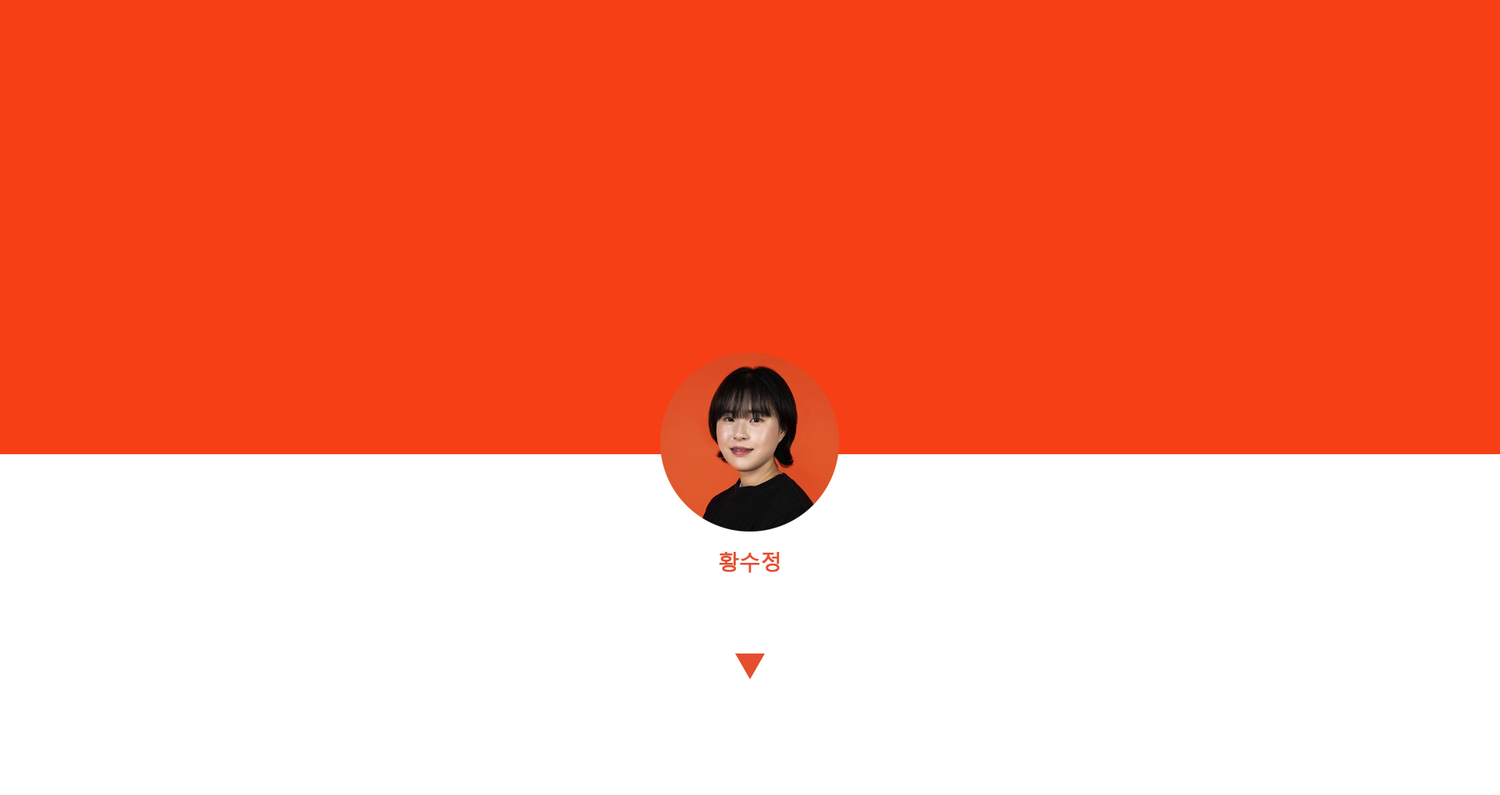
<style>
.page{position:relative;width:1500px;height:795px;background:#f63f14}
.page>*{position:absolute;margin:0}
.t1{font:20.8px "MalgunGothic";color:#e54e2f;font-weight:bold}
</style>
<div class="page">
<p class="t1" style="left:719px;top:552px;width:61px;height:21px">황수정</p>
</div>
